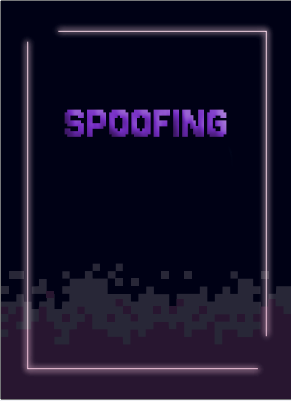
<style>
.page{position:relative;width:291px;height:401px;background:#000115}
.page>*{position:absolute;margin:0}
.t1{font:50px "Jersey10-Regular";letter-spacing:0.025em}
</style>
<div class="page">
<p class="t1" style="left:64px;top:109px;width:163px;height:28px">SPOOFING</p>
</div>
